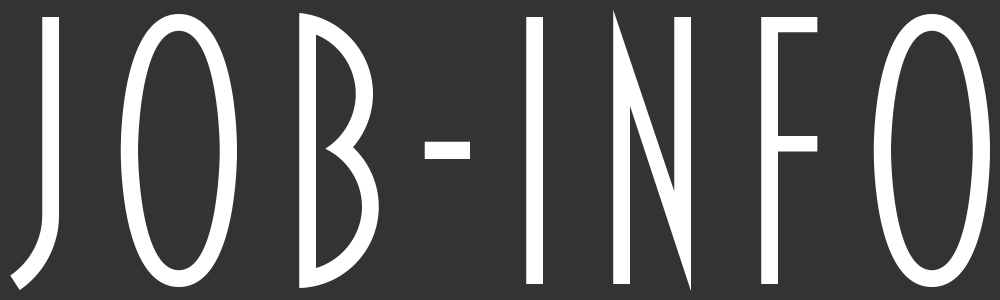
<style>
.page{position:relative;width:1000px;height:300px;background:#333333}
.page>*{position:absolute;margin:0}
.t1{font:390.4px "Blakely-Light";color:#ffffff}
</style>
<div class="page">
<p class="t1" style="left:10px;top:10px;width:980px;height:281px">JOB-INFO</p>
</div>
